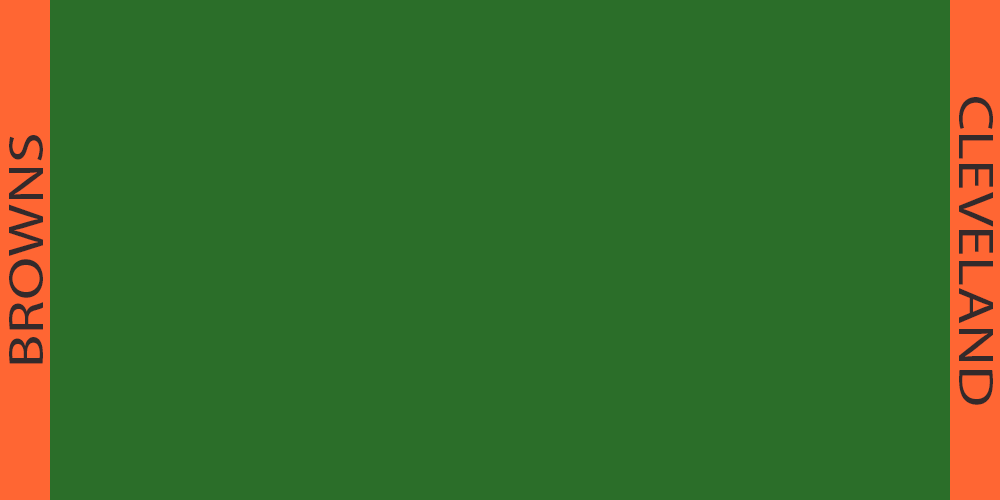
<style>
.page{position:relative;width:1000px;height:500px;background:#2b6e29}
.page>*{position:absolute;margin:0}
.t1{font:12px "MyriadPro-Regular";color:#332a2b;scale:1.25 1}
</style>
<div class="page">
<p class="t1" style="left:959px;top:97px;width:34px;height:308px;rotate:90deg">CLEVELAND</p>
<p class="t1" style="left:9px;top:135px;width:34px;height:229px;rotate:-90deg">BROWNS</p>
</div>
